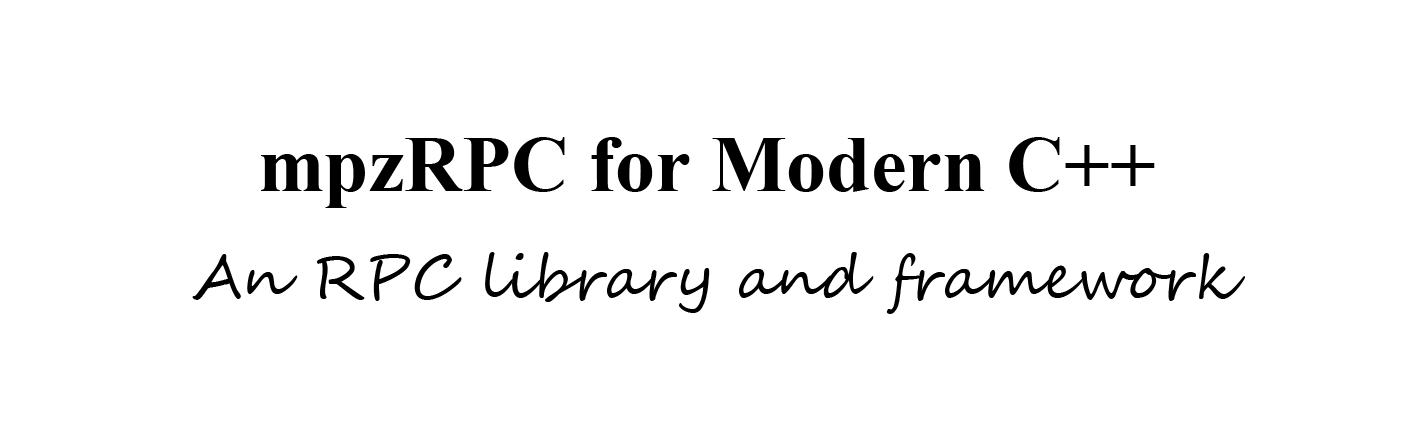
<style>
.page{position:relative;width:1417px;height:425px;background:#ffffff}
.page>*{position:absolute;margin:0}
.t1{font:80px "TimesNewRomanPS-BoldMT";color:#000000}
.t2{font:60px "SegoeScript";color:#000000}
</style>
<div class="page">
<p class="t1" style="left:261px;top:137px;width:894px;height:71px">mpzRPC for Modern C++</p>
<p class="t2" style="left:192px;top:252px;width:1053px;height:62px">An RPC library and framework</p>
</div>
